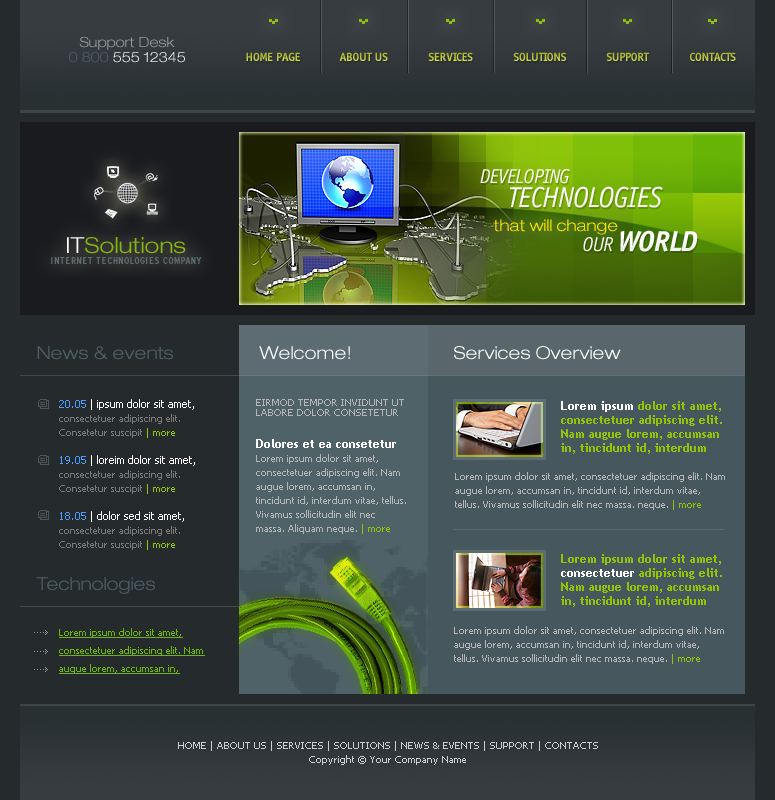
<style>
.page{position:relative;width:775px;height:800px;background:#252a2d}
.page>*{position:absolute;margin:0}
.t1{font:14px "HelveticaNeueLTPro-LtEx";color:#9a9d9f}
.t2{font:14px "HelveticaNeueLTPro-LtEx"}
.t3{font:12px "OffensiveBoldBold";letter-spacing:-0.04em;color:#b7c03a;text-transform:uppercase}
.t4{font:12px "OffensiveBoldBold";letter-spacing:-0.04em;color:#b0bb36;text-transform:uppercase}
.t5{font:20px "OfficinaSansStd-BookItalic";letter-spacing:-0.04em;color:#fbfbfb;text-transform:uppercase}
.t6{font:29px "OfficinaSansStd-BookItalic";letter-spacing:-0.04em;color:#fcfcfc;text-transform:uppercase}
.t7{font:16px "HelveticaNeueLTPro-LtEx";color:#ffe400}
.t8{font:29px "OfficinaSansStd-BoldItalic";letter-spacing:-0.04em;color:#fcfcfc;text-transform:uppercase}
.t9{font:20px "OfficinaSansStd-BookItalic";letter-spacing:-0.04em;color:#fcfcfc;text-transform:uppercase}
.t10{font:22px "HelveticaNeueLTPro-LtEx";color:#84b50b}
.t11{font:22px "HelveticaNeueLTPro-LtEx";color:#ffffff}
.t12{font:10px "Interstate-BoldCondensed";letter-spacing:0.06em;color:#5d6c72}
.t13{font:18px "HelveticaNeueLTPro-LtEx";color:#4f6268}
.t14{font:18px "HelveticaNeueLTPro-LtEx";color:#ffffff}
.t15{font:10px/14px "Tahoma";color:#7a7a7a}
.t16{font:11px/14px "Tahoma";color:#4c9dff}
.t17{font:11px/14px "Tahoma";color:#ffffff}
.t18{font:10px/14px "Tahoma";color:#92c307}
.t19{font:10px "Tahoma";color:#b6b6b6;text-transform:uppercase}
.t20{font:12px/14px "TrebuchetMS-Bold";color:#92c307}
.t21{font:12px/14px "TrebuchetMS-Bold";color:#ffffff}
.t22{font:10px/14px "Tahoma";color:#b6b6b6}
.t23{font:12px/12px "TrebuchetMS-Bold";color:#ffffff}
.t24{font:10px/18px "Tahoma";color:#70b606;text-decoration:underline}
.t25{font:10px/14px "Tahoma";color:#cecece}
</style>
<div class="page">
<p class="t1" style="left:79px;top:36px;width:96px;height:14px">Support Desk</p>
<p class="t2" style="left:69px;top:52px;width:116px;height:11px">0 800 555 12345</p>
<p class="t3" style="left:246px;top:52px;width:54px;height:9px">home page</p>
<p class="t3" style="left:339px;top:52px;width:49px;height:9px">about us</p>
<p class="t3" style="left:428px;top:52px;width:45px;height:9px">services</p>
<p class="t3" style="left:513px;top:52px;width:53px;height:9px">solutions</p>
<p class="t4" style="left:606px;top:52px;width:44px;height:9px">support</p>
<p class="t3" style="left:690px;top:52px;width:46px;height:9px">contacts</p>
<p class="t5" style="left:480px;top:169px;width:90px;height:15px">DEVELOPING</p>
<p class="t6" style="left:510px;top:186px;width:153px;height:22px">TECHNOLOGIES</p>
<p class="t7" style="left:493px;top:219px;width:125px;height:16px">that will change</p>
<p class="t8" style="left:583px;top:230px;width:115px;height:22px"><span class="t9">our </span>World</p>
<p class="t10" style="left:67px;top:237px;width:119px;height:17px"><span class="t11">IT</span>Solutions</p>
<p class="t12" style="left:51px;top:257px;width:151px;height:7px">INTERNET TECHNOLOGIES COMPANY</p>
<p class="t13" style="left:37px;top:346px;width:136px;height:14px">News &amp; events</p>
<p class="t14" style="left:259px;top:346px;width:91px;height:14px">Welcome!</p>
<p class="t14" style="left:454px;top:346px;width:167px;height:14px">Services Overview</p>
<p class="t15" style="left:59px;top:399px;width:136px;height:151px"><span class="t16">20.05</span><span class="t17"> | ipsum dolor sit amet, </span>consectetuer adipiscing elit. Consetetur suscipit <span class="t18">| more<br><br></span><span class="t16">19.05</span><span class="t17"> | loreim dolor sit amet, </span>consectetuer adipiscing elit. Consetetur suscipit <span class="t18">| more<br><br></span><span class="t16">18.05</span><span class="t17"> | dolor sed sit amet, </span>consectetuer adipiscing elit. Consetetur suscipit <span class="t18">| more</span></p>
<p class="t19" style="left:256px;top:399px;width:148px;height:17px">Eirmod tempor invidunt Ut labore dolor consetetur</p>
<p class="t20" style="left:561px;top:401px;width:161px;height:53px"><span class="t21">Lorem ipsum</span> dolor sit amet, consectetuer adipiscing elit. Nam augue lorem, accumsan in, tincidunt id, interdum</p>
<p class="t22" style="left:256px;top:439px;width:150px;height:95px"><span class="t23">Dolores et ea consetetur <br></span>Lorem ipsum dolor sit amet, consectetuer adipiscing elit. Nam augue lorem, accumsan in, tincidunt id, interdum vitae, tellus. Vivamus sollicitudin elit nec massa. Aliquam neque. <span class="t18">| more</span></p>
<p class="t22" style="left:455px;top:472px;width:270px;height:38px">Lorem ipsum dolor sit amet, consectetuer adipiscing elit. Nam augue lorem, accumsan in, tincidunt id, interdum vitae, tellus. Vivamus sollicitudin elit nec massa. neque. <span class="t18">| more</span></p>
<p class="t20" style="left:561px;top:554px;width:161px;height:53px">Lorem ipsum dolor sit amet, <span class="t21">consectetuer </span>adipiscing elit. Nam augue lorem, accumsan in, tincidunt id, interdum</p>
<p class="t13" style="left:36px;top:577px;width:119px;height:17px">Technologies</p>
<p class="t24" style="left:59px;top:628px;width:146px;height:46px">Lorem ipsum dolor sit amet, consectetuer adipiscing elit. Nam augue lorem, accumsan in,</p>
<p class="t22" style="left:454px;top:626px;width:270px;height:38px">Lorem ipsum dolor sit amet, consectetuer adipiscing elit. Nam augue lorem, accumsan in, tincidunt id, interdum vitae, tellus. Vivamus sollicitudin elit nec massa. neque. <span class="t18">| more</span></p>
<p class="t25" style="left:178px;top:741px;width:420px;height:24px;text-align:center">HOME | ABOUT US | SERVICES | SOLUTIONS | NEWS &amp; EVENTS | SUPPORT | CONTACTS<br>Copyright © Your Company Name</p>
</div>
